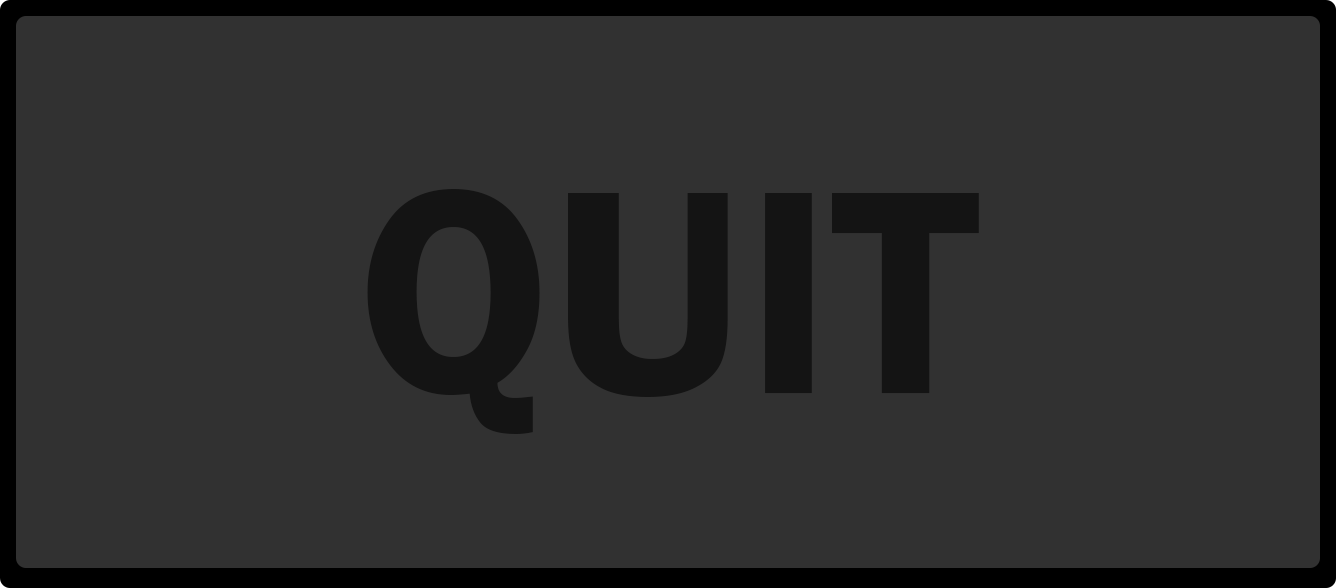
<style>
.page{position:relative;width:1336px;height:588px;background:#313131}
.page>*{position:absolute;margin:0}
.t1{font:300px "FranklinGothic-Demi";color:#141414}
</style>
<div class="page">
<p class="t1" style="left:367px;top:189px;width:612px;height:245px">QUIT</p>
</div>
